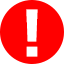
<style>
.page{position:relative;width:64px;height:64px;background:#ff0000}
.page>*{position:absolute;margin:0}
.t1{font:64px "mplus-1m-bold";color:#ffffff}
</style>
<div class="page">
<p class="t1" style="left:26px;top:9px;width:12px;height:48px">!</p>
</div>
